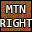
<style>
.page{position:relative;width:32px;height:32px;background:#996633}
.page>*{position:absolute;margin:0}
.t1{font:12px "Consolas";color:#ffffff}
</style>
<div class="page">
<p class="t1" style="left:0px;top:5px;width:33px;height:22px;text-align:center">MTN<br>RIGHT</p>
</div>
